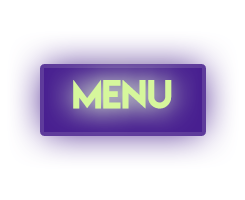
<style>
.page{position:relative;width:245px;height:200px;background:#ffffff}
.page>*{position:absolute;margin:0}
.t1{font:36px "LemonMilk";letter-spacing:-0.005em;color:#d6f79c}
</style>
<div class="page">
<p class="t1" style="left:73px;top:80px;width:99px;height:29px">Menu</p>
</div>
